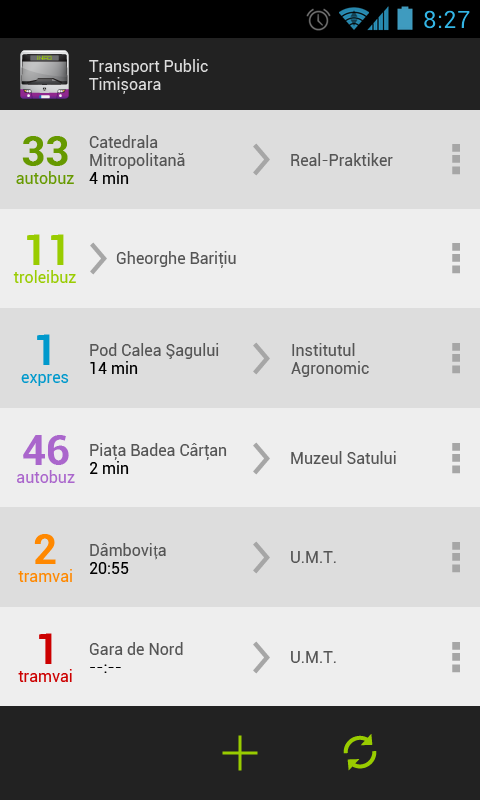
<style>
.page{position:relative;width:480px;height:800px;background:#dddddd}
.page>*{position:absolute;margin:0}
.t1{font:16px/18px "Roboto-Regular";color:#dddddd}
.t2{font:42px "Roboto-Bold";color:#669900}
.t3{font:16px/18px "Roboto-Regular";color:#555555}
.t4{font:16px/18px "Roboto-Regular";color:#000000}
.t5{font:16px "Roboto-Regular";color:#555555}
.t6{font:16px "Roboto-Regular";color:#669900}
.t7{font:42px "Roboto-Bold";color:#99cc00}
.t8{font:16px "Roboto-Regular";color:#99cc00}
.t9{font:42px "Roboto-Bold";color:#0099cc}
.t10{font:16px "Roboto-Regular";color:#0099cc}
.t11{font:42px "Roboto-Bold";color:#aa66cc}
.t12{font:16px "Roboto-Regular";color:#aa66cc}
.t13{font:42px "Roboto-Bold";color:#ff8800}
.t14{font:16px/18px "MinionPro-Regular";color:#555555}
.t15{font:16px "Roboto-Regular";color:#ff8800}
.t16{font:42px "Roboto-Bold";color:#cc0000}
.t17{font:16px "Roboto-Regular";color:#cc0000}
</style>
<div class="page">
<p class="t1" style="left:89px;top:59px;width:119px;height:35px">Transport Public<br>Timișoara</p>
<p class="t2" style="left:22px;top:136px;width:46px;height:30px">33</p>
<p class="t3" style="left:89px;top:135px;width:96px;height:49px">Catedrala<br>Mitropolitană<br><span class="t4">4 min</span></p>
<p class="t5" style="left:291px;top:153px;width:102px;height:13px">Real-Praktiker</p>
<p class="t6" style="left:16px;top:171px;width:58px;height:13px">autobuz</p>
<p class="t7" style="left:27px;top:234px;width:37px;height:31px">11</p>
<p class="t5" style="left:116px;top:251px;width:120px;height:17px">Gheorghe Bariţiu</p>
<p class="t8" style="left:13px;top:270px;width:63px;height:13px">troleibuz</p>
<p class="t9" style="left:37px;top:334px;width:13px;height:31px">1</p>
<p class="t3" style="left:90px;top:343px;width:129px;height:31px">Pod Calea Şagului<br><span class="t4">14 min</span></p>
<p class="t3" style="left:291px;top:343px;width:78px;height:34px">Institutul<br>Agronomic</p>
<p class="t10" style="left:21px;top:374px;width:48px;height:12px">expres</p>
<p class="t11" style="left:23px;top:435px;width:46px;height:30px">46</p>
<p class="t3" style="left:90px;top:443px;width:137px;height:31px">Piaţa Badea Cârţan<br><span class="t4">2 min</span></p>
<p class="t5" style="left:291px;top:451px;width:105px;height:13px">Muzeul Satului</p>
<p class="t12" style="left:17px;top:470px;width:58px;height:13px">autobuz</p>
<p class="t13" style="left:34px;top:534px;width:22px;height:30px">2</p>
<p class="t3" style="left:90px;top:543px;width:76px;height:31px">Dâmbovi<span class="t14">ț</span>a<br><span class="t4">20:55</span></p>
<p class="t5" style="left:291px;top:551px;width:45px;height:12px">U.M.T.</p>
<p class="t15" style="left:18px;top:569px;width:54px;height:13px">tramvai</p>
<p class="t16" style="left:39px;top:633px;width:13px;height:31px">1</p>
<p class="t3" style="left:89px;top:642px;width:94px;height:31px">Gara de Nord<br><span class="t4">--:--</span></p>
<p class="t5" style="left:291px;top:651px;width:45px;height:12px">U.M.T.</p>
<p class="t17" style="left:18px;top:669px;width:54px;height:13px">tramvai</p>
</div>
